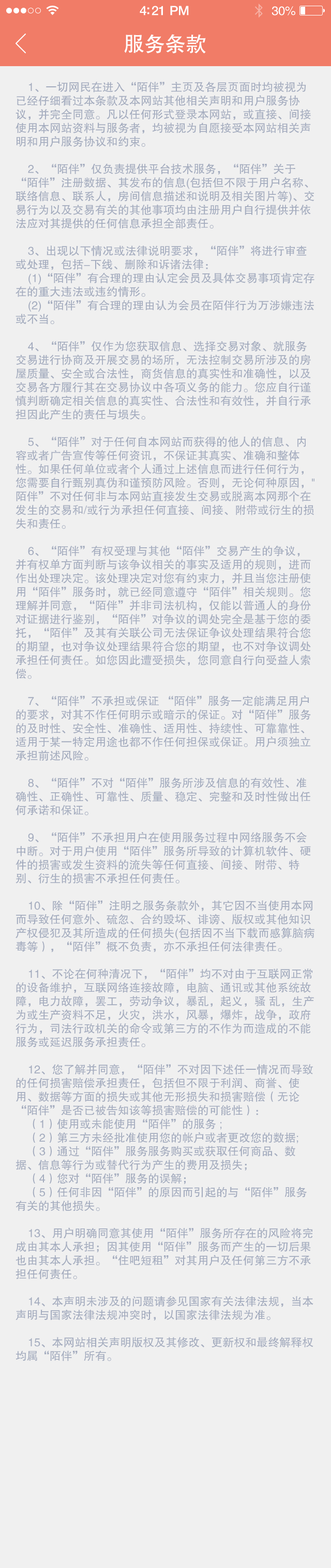
<style>
.page{position:relative;width:331px;height:1568px;background:#f0f0f0}
.page>*{position:absolute;margin:0}
.t1{font:12.9px "HelveticaNeue-Medium";letter-spacing:-0.02em;color:#ffffff}
.t2{font:12.4px "FZHTJW--GB1-0";letter-spacing:-0.02em;color:#ffffff}
.t3{font:20.7px "FZHTJW--GB1-0";color:#ffffff}
.t4{font:11.4px "FZHTJW--GB1-0";color:#a3abbe}
</style>
<div class="page">
<p class="t1" style="left:140px;top:6px;width:49px;height:10px">4:21 PM</p>
<p class="t2" style="left:271px;top:6px;width:24px;height:10px">30%</p>
<p class="t3" style="left:124px;top:34px;width:82px;height:20px">服务条款</p>
<p class="t4" style="left:16px;top:82px;width:298px;height:1279px">1、一切网民在进入“陌伴”主页及各层页面时均被视为已经仔细看过本条款及本网站其他相关声明和用户服务协议，并完全同意。凡以任何形式登录本网站，或直接、间接使用本网站资料与服务者，均被视为自愿接受本网站相关声明和用户服务协议和约束。<br><br>2、“陌伴”仅负责提供平台技术服务，“陌伴”关于“陌伴”注册数据、其发布的信息(包括但不限于用户名称、联络信息、联系人，房间信息描述和说明及相关图片等)、交易行为以及交易有关的其他事项均由注册用户自行提供并依法应对其提供的任何信息承担全部责任。<br><br>3、出现以下情况或法律说明要求，“陌伴”将进行审查或处理，包括-下线、删除和诉诸法律：<br>(1)“陌伴”有合理的理由认定会员及具体交易事项肯定存在的重大违法或违约情形。<br>(2)“陌伴”有合理的理由认为会员在陌伴行为万涉嫌违法或不当。<br><br>4、“陌伴”仅作为您获取信息、选择交易对象、就服务交易进行协商及开展交易的场所，无法控制交易所涉及的房屋质量、安全或合法性，商货信息的真实性和准确性，以及交易各方履行其在交易协议中各项义务的能力。您应自行谨慎判断确定相关信息的真实性、合法性和有效性，并自行承担因此产生的责任与埙失。<br><br>5、“陌伴”对于任何自本网站而获得的他人的信息、内容或者广告宣传等任何资讯，不保证其真实、准确和整体性。如果任何单位或者个人通过上述信息而进行任何行为，您需要自行甄别真伪和谨预防风险。否则，无论何种原因，"陌伴”不对任何非与本网站直接发生交易或脱离本网那个在发生的交易和/或行为承担任何直接、间接、附带或衍生的损失和责任。<br><br>6、“陌伴”有权受理与其他“陌伴”交易产生的争议，并有权单方面判断与该争议相关的事实及适用的规则，进而作出处理决定。该处理决定对您有约束力，并且当您注册使用“陌伴”服务时，就已经同意遵守“陌伴”相关规则。您理解并同意，“陌伴”并非司法机构，仅能以普通人的身份对证据进行鉴别，“陌伴”对争议的调处完全是基于您的委托，“陌伴”及其有关联公司无法保证争议处理结果符合您的期望，也对争议处理结果符合您的期望，也不对争议调处承担任何责任。如您因此遭受损失，您同意自行向受益人索偿。<br><br>7、“陌伴”不承担或保证 “陌伴”服务一定能满足用户的要求，对其不作任何明示或暗示的保证。对“陌伴”服务的及时性、安全性、准确性、适用性、持续性、可靠靠性、适用于某一特定用途也都不作任何担保或保证。用户须独立承担前述风险。<br><br>8、“陌伴”不对“陌伴”服务所涉及信息的有效性、准确性、正确性、可靠性、质量、稳定、完整和及时性做出任何承诺和保证。<br><br>9、“陌伴”不承担用户在使用服务过程中网络服务不会中断。对于用户使用“陌伴”服务所导致的计算机软件、硬件的损害或发生资料的流失等任何直接、间接、附带、特别、衍生的损害不承担任何责任。<br><br>10、除“陌伴”注明之服务条款外，其它因不当使用本网而导致任何意外、硫忽、合约毁坏、诽谤、版权或其他知识产权侵犯及其所造成的任何损失(包括因不当下载而感算脑病毒等），“陌伴”概不负责，亦不承担任何法律责任。<br><br>11、不论在何种清况下，“陌伴”均不对由于互联网正常的设备维护，互联网络连接故障，电脑、通讯或其他系统故障，电力故障，罢工，劳动争议，暴乱，起义，骚 乱，生产为或生产资料不足，火灾，洪水，风暴，爆炸，战争，政府行为，司法行政机关的命令或第三方的不作为而造成的不能服务或延迟服务承担责任。<br><br>12、您了解并同意，“陌伴”不对因下述任一情况而导致的任何损害赔偿承担责任，包括但不限于利润、商誉、使用、数据等方面的损失或其他无形损失和损害赔偿（无论“陌伴”是否已被告知该等损害赔偿的可能性）：<br>（1）使用或未能使用“陌伴”的服务 ;<br>（2）第三方未经批准使用您的帐户或者更改您的数据;<br>（3）通过“陌伴”服务服务购买或获取任何商品、数据、信息等行为或替代行为产生的费用及损失；<br>（4）您对“陌伴”服务的误解；<br>（5）任何非因“陌伴”的原因而引起的与“陌伴”服务有关的其他损失。<br><br>13、用户明确同意其使用“陌伴”服务所存在的风险将完成由其本人承担；因其使用“陌伴”服务而产生的一切后果也由其本人承担。“住吧短租”对其用户及任何第三方不承担任何责任。<br><br>14、本声明未涉及的问题请参见国家有关法律法规，当本声明与国家法律法规冲突时，以国家法律法规为准。<br><br>15、本网站相关声明版权及其修改、更新权和最终解释权均属“陌伴”所有。</p>
</div>
